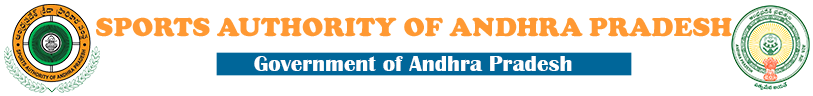
<style>
.page{position:relative;width:813px;height:96px;background:#ffffff}
.page>*{position:absolute;margin:0}
.t1{font:27px "CooperBlack";color:#ff9933}
.t2{font:23px "BritannicBold";color:#ffffff}
</style>
<div class="page">
<p class="t1" style="left:96px;top:17px;width:636px;height:20px">SPORTS AUTHORITY OF ANDHRA PRADESH</p>
<p class="t2" style="left:254px;top:56px;width:318px;height:15px">Government of Andhra Pradesh</p>
</div>
